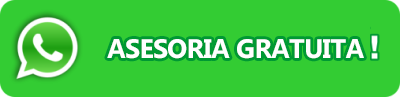
<style>
.page{position:relative;width:400px;height:97px;background:#33cc33}
.page>*{position:absolute;margin:0}
.t1{font:26.7px "Ebrima-Bold";letter-spacing:-0.025em;color:#ffffff}
</style>
<div class="page">
<p class="t1" style="left:107px;top:39px;width:257px;height:20px">ASESORIA GRATUITA</p>
</div>
